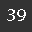
<style>
.page{position:relative;width:32px;height:32px;background:#333333}
.page>*{position:absolute;margin:0}
.t1{font:17.8px "MyriadPro-Regular";color:#ffffff;scale:1.12 1}
</style>
<div class="page">
<p class="t1" style="left:7px;top:9px;width:19px;height:12px">39</p>
</div>
